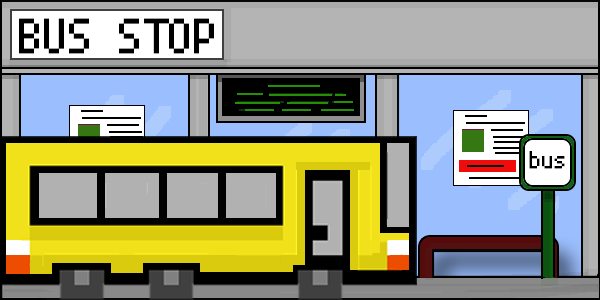
<style>
.page{position:relative;width:600px;height:300px}
.page>*{position:absolute;margin:0}
.t1{font:50px "PixelMplus10-Regular";color:#000000}
.t2{font:25px "PixelMplus10-Regular";color:#000000}
</style>
<div class="page">
<p class="t1" style="left:19px;top:18px;width:195px;height:36px">BUS STOP</p>
<p class="t2" style="left:529px;top:151px;width:36px;height:18px">bus</p>
</div>
